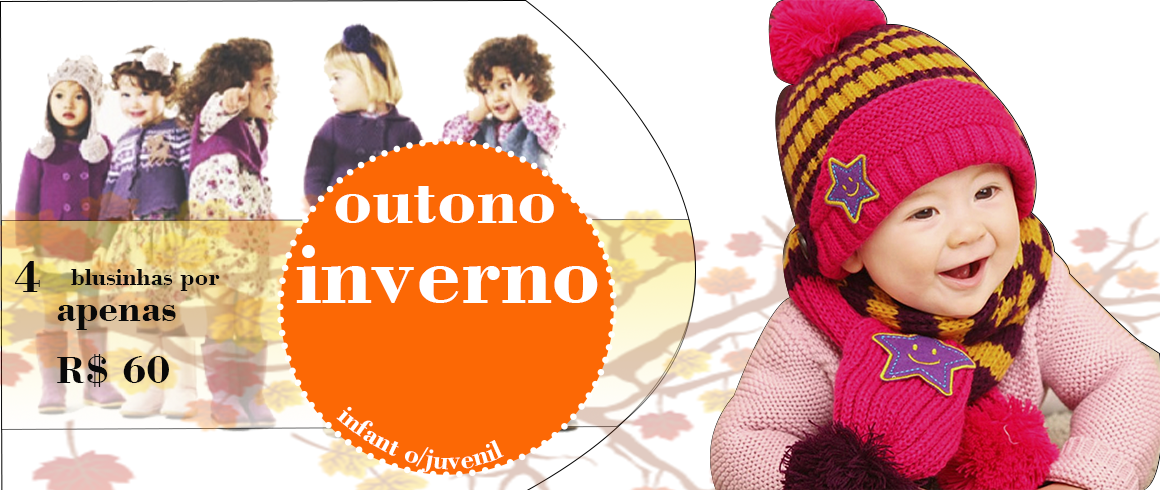
<style>
.page{position:relative;width:1160px;height:490px;background:#ffffff}
.page>*{position:absolute;margin:0}
.t1{font:72.9px "BodoniBT-Bold";color:#ffffff}
.t2{font:91.5px "BodoniBT-Bold";color:#ffffff}
.t3{font:45.7px "BodoniBT-Bold";color:#090909}
.t4{font:25.4px "BodoniBT-Bold";color:#090909}
.t5{font:40.6px "BodoniBT-Bold";color:#090909}
.t6{font:27.9px "BodoniBT-Bold";color:#ffffff}
</style>
<div class="page">
<p class="t1" style="left:335px;top:186px;width:219px;height:37px">outono</p>
<p class="t2" style="left:296px;top:245px;width:302px;height:58px">inverno</p>
<p class="t3" style="left:15px;top:261px;width:25px;height:31px">4</p>
<p class="t4" style="left:71px;top:269px;width:149px;height:22px">blusinhas por</p>
<p class="t5" style="left:57px;top:305px;width:119px;height:25px">apenas</p>
<p class="t5" style="left:57px;top:354px;width:112px;height:33px">R$ 60</p>
<p class="t6" style="left:336px;top:406px;width:168px;height:67px">infant o/juvenil</p>
</div>
